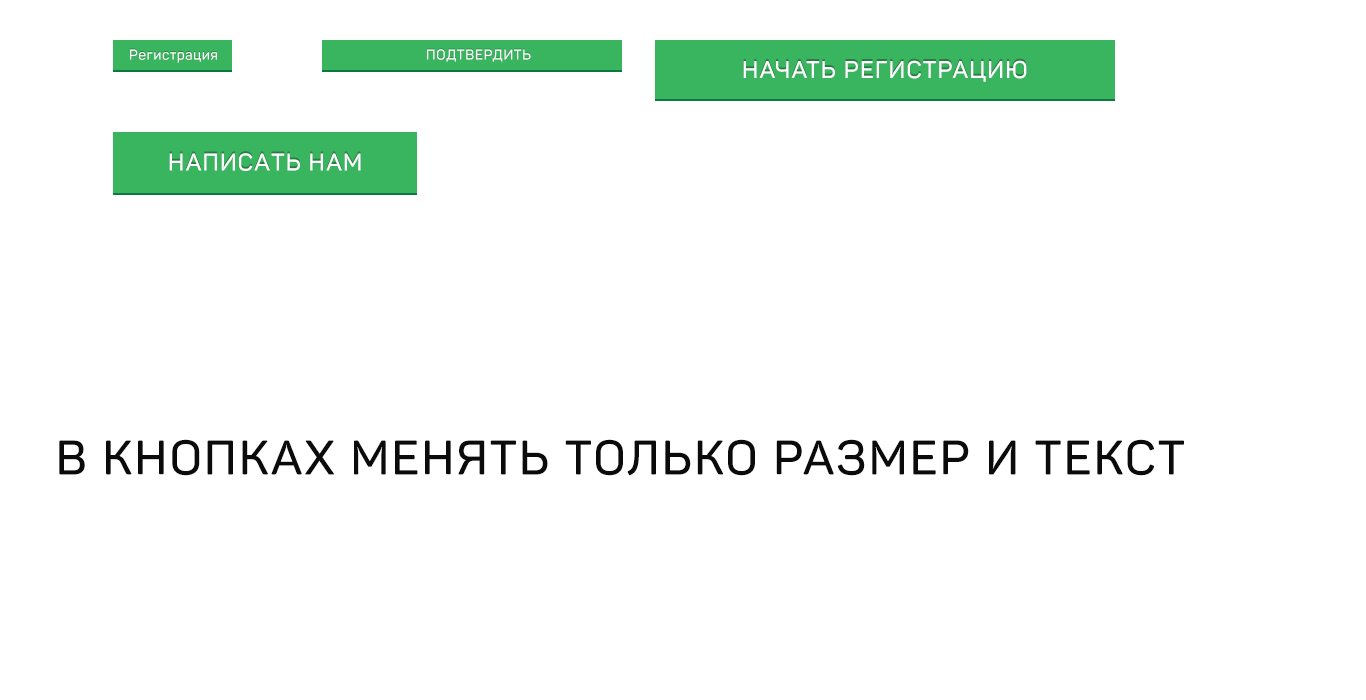
<style>
.page{position:relative;width:1366px;height:700px;background:#ffffff}
.page>*{position:absolute;margin:0}
.t1{font:14px "Panton-SemiBold";letter-spacing:0.05em;color:#ffffff}
.t2{font:14px "Panton-SemiBold";letter-spacing:0.05em;color:#ffffff;text-transform:uppercase}
.t3{font:24px "Panton-SemiBold";letter-spacing:0.05em;color:#ffffff;text-transform:uppercase}
</style>
<div class="page">
<p class="t1" style="left:130px;top:49px;width:87px;height:14px">Регистрация</p>
<p class="t2" style="left:427px;top:49px;width:104px;height:13px">Подтвердить</p>
<p class="t3" style="left:743px;top:60px;width:284px;height:22px">начать регистрацию</p>
<p class="t3" style="left:169px;top:153px;width:192px;height:18px">написать нам</p>
</div>
